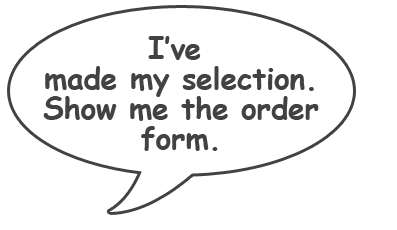
<style>
.page{position:relative;width:397px;height:230px;background:#ffffff}
.page>*{position:absolute;margin:0}
.t1{font:30px/30px "ComicSansMS-Bold";letter-spacing:-0.01em;color:#424242}
</style>
<div class="page">
<p class="t1" style="left:43px;top:36px;width:276px;height:115px;text-align:center">I’ve <br>made my selection.<br>Show me the order<br>form.</p>
</div>
